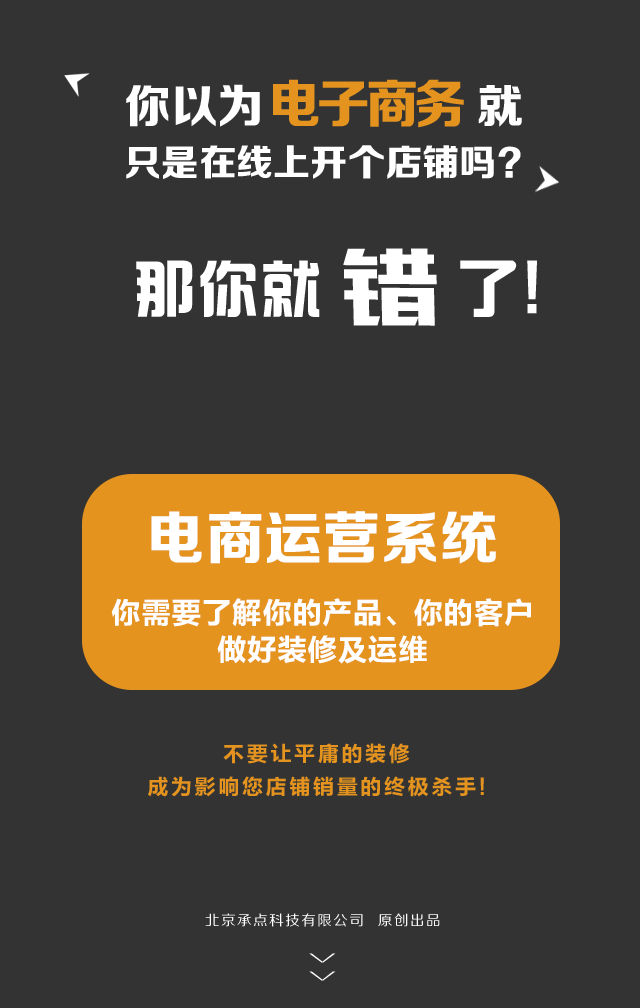
<style>
.page{position:relative;width:640px;height:1008px;background:#333333}
.page>*{position:absolute;margin:0}
.t1{font:46px "FZZDHJW--GB1-0";letter-spacing:0.005em;color:#ffffff;text-transform:uppercase}
.t2{font:52.7px "FZZDHJW--GB1-0";letter-spacing:-0.075em;color:#e4931f;text-transform:uppercase}
.t3{font:36.8px "FZZDHJW--GB1-0";color:#ffffff;text-transform:uppercase}
.t4{font:103.4px "MFBanHei_Noncommercial-Regular";color:#ffffff;text-transform:uppercase;scale:0.91 1}
.t5{font:61.1px "¹ã½Ý¾ÓÃÔÄã×Ö¿â";letter-spacing:0.05em;color:#ffffff;text-transform:uppercase}
.t6{font:65.1px "FZLTCHK--GBK1-0";color:#ffffff;text-transform:uppercase}
.t7{font:57.7px "FZZDHJW--GB1-0";letter-spacing:0.005em;color:#ffffff;text-transform:uppercase}
.t8{font:30.2px/36.3px "FZLTCHK--GBK1-0";color:#ffffff;text-transform:uppercase}
.t9{font:21.5px/32.2px "FZLTCHK--GBK1-0";letter-spacing:0.1em;color:#e4931f;text-transform:uppercase}
.t10{font:14.2px "FZZHJW--GB1-0";letter-spacing:0.1em;color:#ffffff;text-transform:uppercase}
.t11{font:36.8px "FZZXHJW--GB1-0";letter-spacing:0.5em;color:#ffffff;text-transform:uppercase;scale:0.44 1}
</style>
<div class="page">
<p class="t1" style="left:126px;top:84px;width:396px;height:43px">你以为                就</p>
<p class="t2" style="left:273px;top:79px;width:191px;height:49px">电子商务</p>
<p class="t3" style="left:126px;top:145px;width:395px;height:34px">只是在线上开个店铺吗？</p>
<p class="t4" style="left:343px;top:248px;width:94px;height:78px">错</p>
<p class="t5" style="left:136px;top:260px;width:381px;height:57px">那你就    了</p>
<p class="t6" style="left:527px;top:260px;width:10px;height:54px">!</p>
<p class="t7" style="left:151px;top:511px;width:345px;height:53px">电商运营系统</p>
<p class="t8" style="left:111px;top:598px;width:420px;height:66px;text-align:center">你需要了解你的产品、你的客户<br>做好装修及运维</p>
<p class="t9" style="left:148px;top:743px;width:336px;height:54px;text-align:center">不要让平庸的装修<br>成为影响您店铺销量的终极杀手!</p>
<p class="t10" style="left:205px;top:913px;width:235px;height:14px">北京承点科技有限公司  原创出品</p>
<p class="t11" style="left:309px;top:953px;width:27px;height:28px;rotate:90deg">&gt;&gt;</p>
</div>
